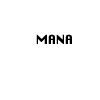
<style>
.page{position:relative;width:100px;height:100px;background:#ffffff}
.page>*{position:absolute;margin:0}
.t1{font:12px "Krungthep";color:#000000}
</style>
<div class="page">
<p class="t1" style="left:36px;top:34px;width:36px;height:10px">MANA</p>
</div>
